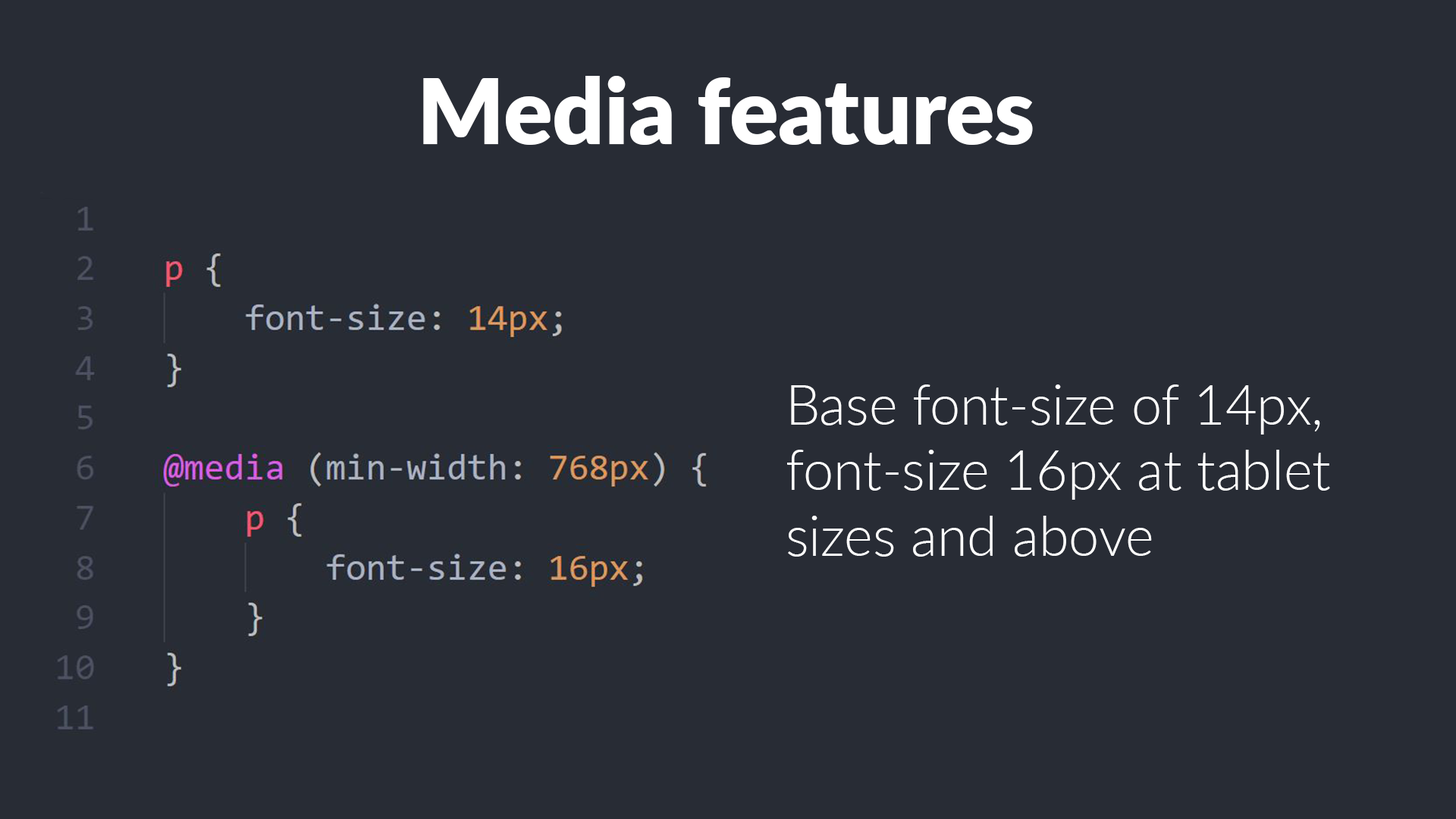
<style>
.page{position:relative;width:1456px;height:819px;background:#282c35}
.page>*{position:absolute;margin:0}
.t1{font:91px "Lato-ExtraBold";color:#ffffff}
.t2{font:54.6px "Lato-Light";color:#ffffff}
</style>
<div class="page">
<p class="t1" style="left:423px;top:76px;width:610px;height:69px">Media features</p>
<p class="t2" style="left:787px;top:384px;width:543px;height:173px">Base font-size of 14px,<br>font-size 16px at tablet<br>sizes and above</p>
</div>
